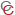
<style>
.page{position:relative;width:15px;height:15px;background:#ffffff}
.page>*{position:absolute;margin:0}
.t1{font:14.4px "ArialNarrow";letter-spacing:0.05em;color:#6d6e70;scale:1.37 1}
.t2{font:14.4px "ArialNarrow";letter-spacing:0.05em;color:#be1e2d;scale:1.37 1}
</style>
<div class="page">
<p class="t1" style="left:0px;top:1px;width:11px;height:10px">C</p>
<p class="t2" style="left:3px;top:5px;width:11px;height:10px">C</p>
</div>
